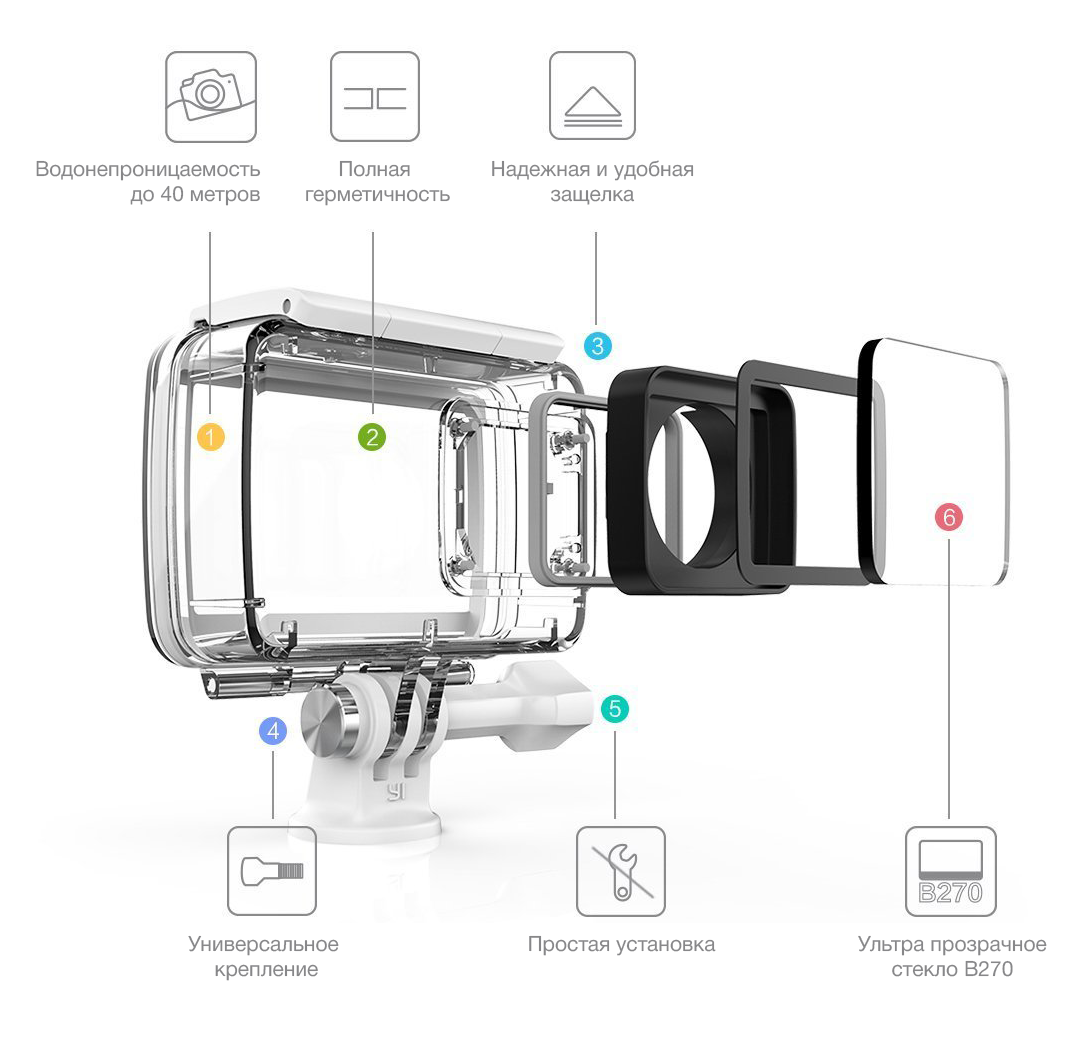
<style>
.page{position:relative;width:1076px;height:1041px;background:#ffffff}
.page>*{position:absolute;margin:0}
.t1{font:21px "HelveticaNeueCyr-Roman";color:#878789}
</style>
<div class="page">
<p class="t1" style="left:36px;top:160px;width:225px;height:46px;text-align:right">Водонепроницаемость<br>до 40 метров</p>
<p class="t1" style="left:306px;top:160px;width:144px;height:46px;text-align:center">Полная <br>герметичность</p>
<p class="t1" style="left:492px;top:160px;width:202px;height:45px;text-align:center">Надежная и удобная<br>защелка</p>
<p class="t1" style="left:188px;top:935px;width:151px;height:46px;text-align:center">Универсальное <br>крепление</p>
<p class="t1" style="left:529px;top:935px;width:187px;height:21px">Простая установка</p>
<p class="t1" style="left:858px;top:935px;width:189px;height:42px;text-align:center">Ультра прозрачное<br>стекло B270</p>
</div>
